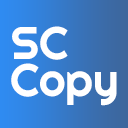
<style>
.page{position:relative;width:128px;height:128px}
.page>*{position:absolute;margin:0}
.t1{font:45.7px "Righteous-Regular";color:#ffffff}
</style>
<div class="page">
<p class="t1" style="left:12px;top:26px;width:56px;height:34px">SC</p>
<p class="t1" style="left:11px;top:63px;width:106px;height:43px">Copy</p>
</div>
